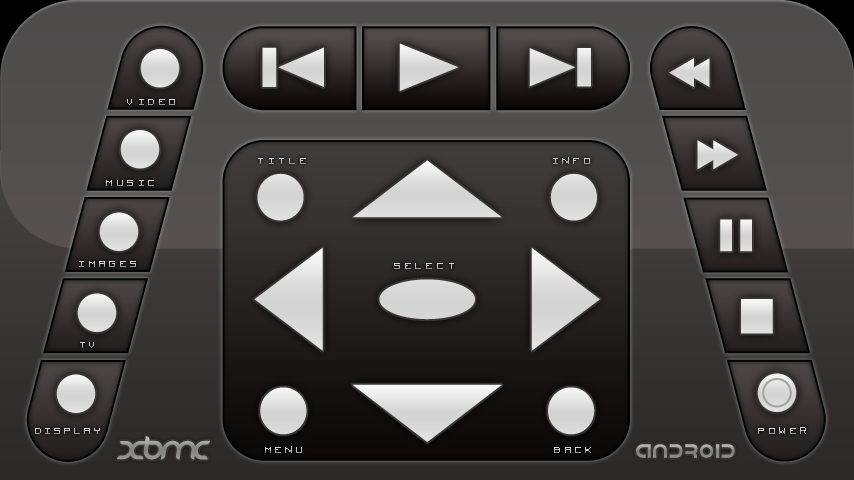
<style>
.page{position:relative;width:854px;height:480px}
.page>*{position:absolute;margin:0}
.t1{font:16px "VisitorTT2BRK";letter-spacing:0.18em}
.t2{font:16px "VisitorTT2BRK";letter-spacing:0.2em}
.t3{font:16px "VisitorTT2BRK";letter-spacing:0.18em;color:#cfcfcf}
.t4{font:16px "VisitorTT2BRK";letter-spacing:0.15em}
</style>
<div class="page">
<p class="t1" style="left:127px;top:99px;width:48px;height:6px">VIDEO</p>
<p class="t2" style="left:258px;top:158px;width:48px;height:6px">TITLE</p>
<p class="t2" style="left:553px;top:157px;width:37px;height:7px">INFO</p>
<p class="t1" style="left:106px;top:180px;width:48px;height:6px">MUSIC</p>
<p class="t1" style="left:79px;top:261px;width:57px;height:6px">IMAGES</p>
<p class="t2" style="left:394px;top:263px;width:60px;height:6px">SELECT</p>
<p class="t3" style="left:80px;top:342px;width:14px;height:6px">TV</p>
<p class="t4" style="left:35px;top:428px;width:65px;height:6px">DISPLAY</p>
<p class="t1" style="left:758px;top:427px;width:48px;height:7px">POWER</p>
<p class="t1" style="left:265px;top:446px;width:37px;height:7px">MENU</p>
<p class="t3" style="left:554px;top:447px;width:37px;height:6px">BACK</p>
</div>
